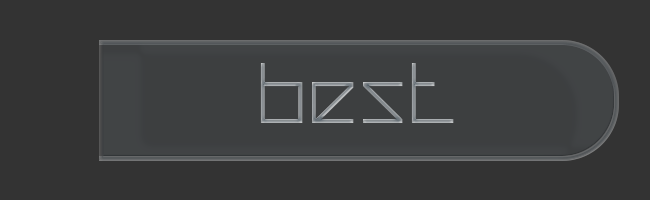
<style>
.page{position:relative;width:650px;height:200px;background:#333333}
.page>*{position:absolute;margin:0}
.t1{font:120px "AuricomRegular";letter-spacing:0.05em}
</style>
<div class="page">
<p class="t1" style="left:260px;top:63px;width:194px;height:60px">Best</p>
</div>
